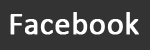
<style>
.page{position:relative;width:150px;height:50px;background:#333333}
.page>*{position:absolute;margin:0}
.t1{font:32px "Calibri";color:#ffffff;font-weight:bold}
</style>
<div class="page">
<p class="t1" style="left:10px;top:12px;width:129px;height:23px">Facebook</p>
</div>
